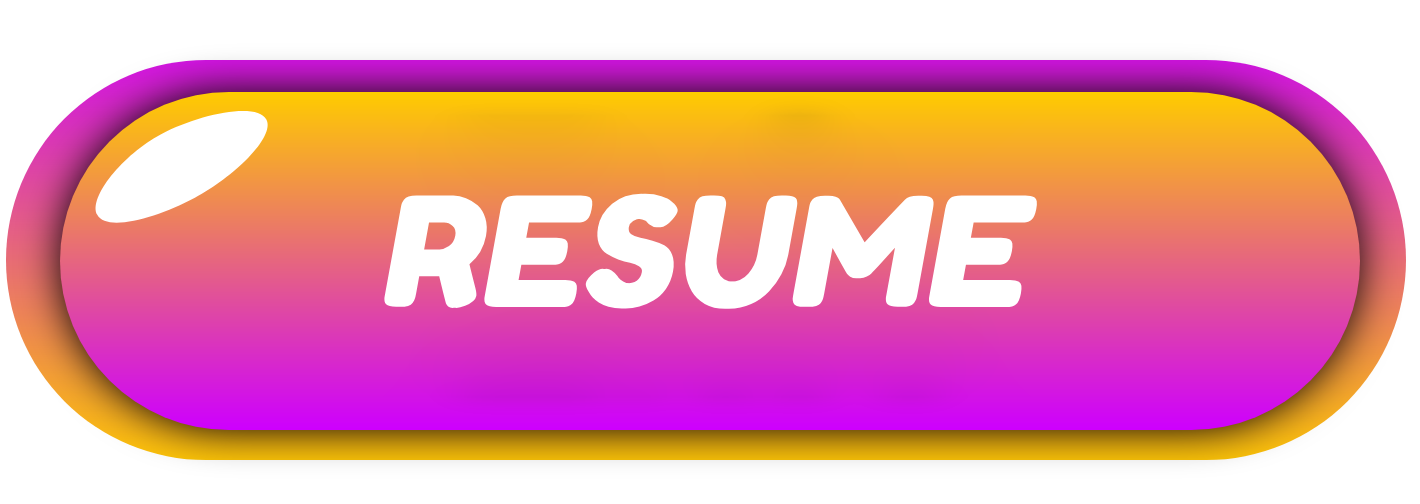
<style>
.page{position:relative;width:1420px;height:504px;background:#ffffff}
.page>*{position:absolute;margin:0}
.t1{font:152px "FredokaOne-Regular";color:#ffffff;font-weight:bold;font-style:italic}
</style>
<div class="page">
<p class="t1" style="left:384px;top:193px;width:654px;height:116px">RESUME</p>
</div>
